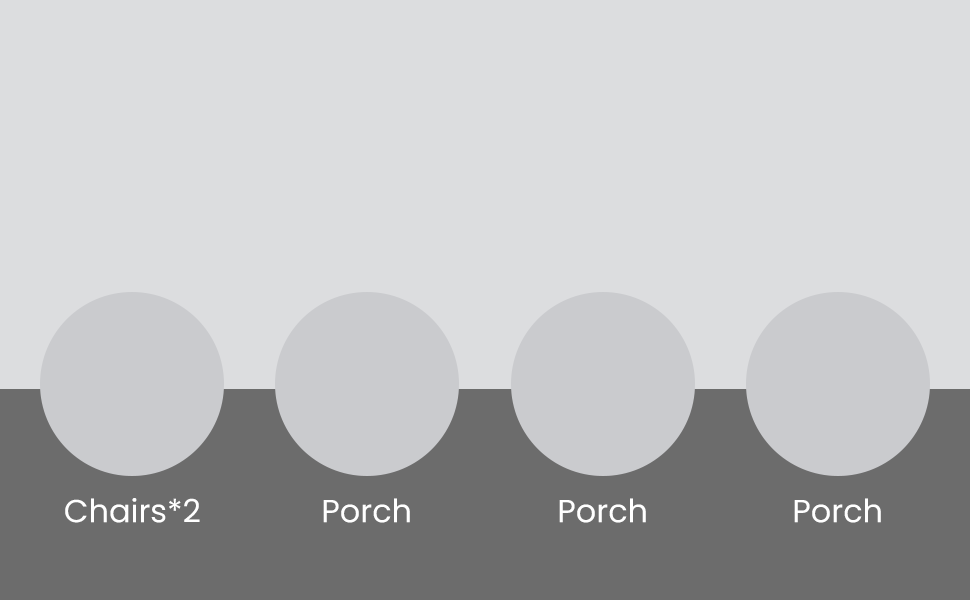
<style>
.page{position:relative;width:970px;height:600px;background:#dcdddf}
.page>*{position:absolute;margin:0}
.t1{font:32px "Poppins-Regular";color:#ffffff}
</style>
<div class="page">
<p class="t1" style="left:65px;top:498px;width:135px;height:25px">Chairs*2</p>
<p class="t1" style="left:323px;top:498px;width:87px;height:25px">Porch</p>
<p class="t1" style="left:559px;top:498px;width:87px;height:25px">Porch</p>
<p class="t1" style="left:794px;top:498px;width:87px;height:25px">Porch</p>
</div>
